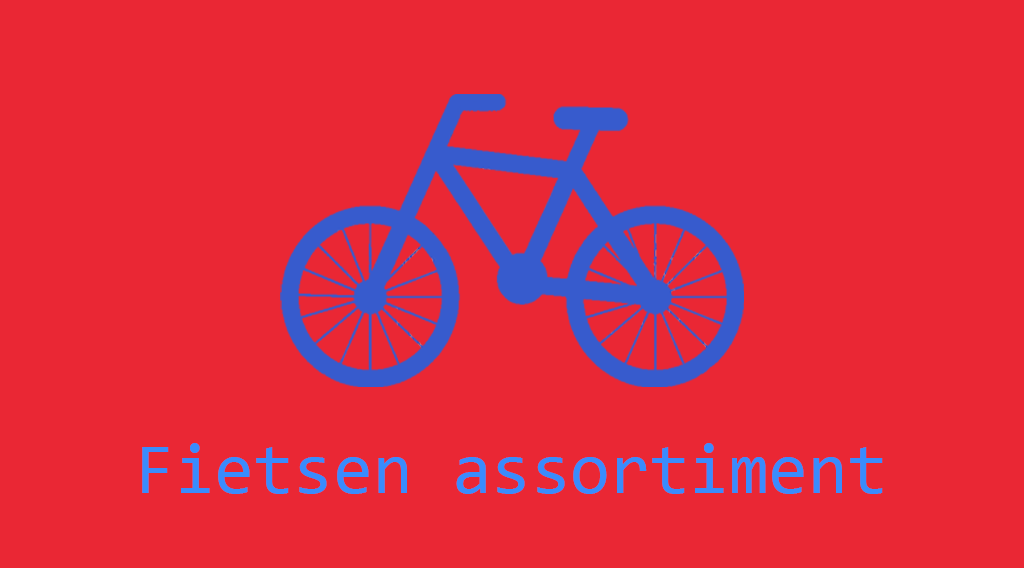
<style>
.page{position:relative;width:1024px;height:568px;background:#ea2734}
.page>*{position:absolute;margin:0}
.t1{font:72px "Consolas";color:#398cfd}
</style>
<div class="page">
<p class="t1" style="left:142px;top:443px;width:741px;height:51px">Fietsen assortiment</p>
</div>
